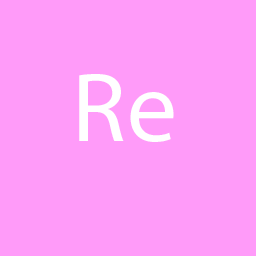
<style>
.page{position:relative;width:256px;height:256px;background:#ff9bf9}
.page>*{position:absolute;margin:0}
.t1{font:100px "MyriadPro-Regular";color:#ffffff}
</style>
<div class="page">
<p class="t1" style="left:79px;top:74px;width:95px;height:68px">Re</p>
</div>
